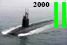
<style>
.page{position:relative;width:67px;height:45px}
.page>*{position:absolute;margin:0}
.t1{font:10.3px "Aparajita-Bold";color:#000000}
</style>
<div class="page">
<p class="t1" style="left:33px;top:2px;width:17px;height:5px">2000</p>
</div>
